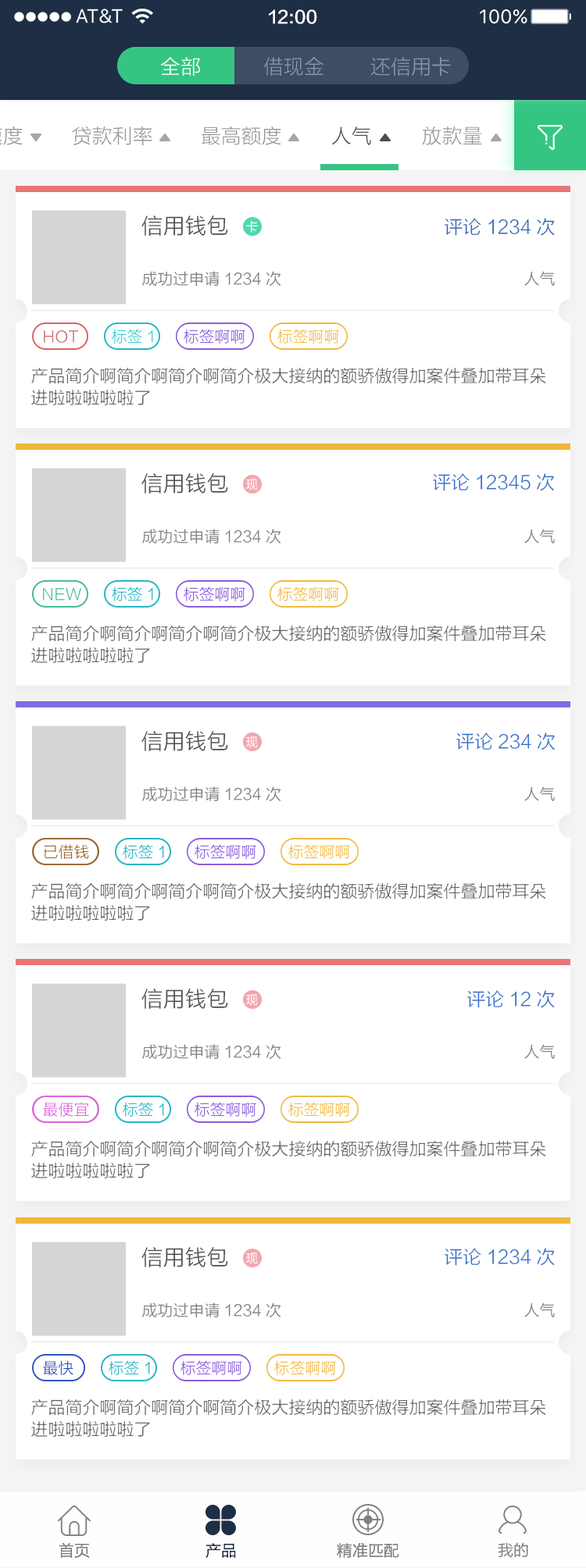
<style>
.page{position:relative;width:586px;height:1568px;background:#ffffff}
.page>*{position:absolute;margin:0}
.t1{font:17.2px "FZLTZHK--GBK1-0";color:#ffffff}
.t2{font:20.3px "FZLTXHK";color:#ffffff}
.t3{font:20.3px "FZLTXHK";color:#8895a8}
.t4{font:20.3px "FZLTXHK";color:#999999}
.t5{font:20.3px "FZLTXHK";color:#4d4d4d}
.t6{font:21.9px "FZLTXHK";color:#4d4d4d}
.t7{font:12.5px "FZLTXHK";color:#ffffff}
.t8{font:18.7px "FZLTXHK";color:#3167b5}
.t9{font:15.6px "FZLTXHK";color:#808080}
.t10{font:15.6px "FZLTXHK";color:#33cccc}
.t11{font:15.6px "FZLTXHK";color:#8857db}
.t12{font:15.6px "FZLTXHK";color:#f1b73c}
.t13{font:15.6px "FZLTXHK";color:#cc6666}
.t14{font:17.2px/21.9px "FZLTXHK";color:#666666}
.t15{font:18.7px "FZLTXHK";color:#3170cc}
.t16{font:15.6px "FZLTXHK";color:#45b991}
.t17{font:15.6px "FZLTXHK";color:#21b5c3}
.t18{font:15.6px "FZLTXHK";color:#996633}
.t19{font:15.6px "FZLTXHK";color:#db5edc}
.t20{font:15.6px "FZLTXHK";color:#294fbb}
.t21{font:15.6px "FZLTXHK";color:#1e2e45}
.t22{font:15.6px "FZLTHK--GBK1-0";color:#808080}
</style>
<div class="page">
<p class="t1" style="left:269px;top:9px;width:48px;height:15px">12:00</p>
<p class="t2" style="left:161px;top:57px;width:39px;height:19px">全部</p>
<p class="t3" style="left:263px;top:57px;width:60px;height:19px">借现金</p>
<p class="t3" style="left:371px;top:57px;width:80px;height:19px">还信用卡</p>
<p class="t4" style="left:72px;top:126px;width:80px;height:20px">贷款利率</p>
<p class="t4" style="left:201px;top:126px;width:80px;height:19px">最高额度</p>
<p class="t4" style="left:422px;top:126px;width:60px;height:19px">放款量</p>
<p class="t5" style="left:332px;top:127px;width:39px;height:18px">人气</p>
<p class="t6" style="left:141px;top:216px;width:87px;height:20px">信用钱包</p>
<p class="t7" style="left:246px;top:220px;width:12px;height:13px">卡</p>
<p class="t8" style="left:444px;top:218px;width:110px;height:18px">评论1234次</p>
<p class="t9" style="left:142px;top:271px;width:139px;height:16px">成功过申请1234次</p>
<p class="t9" style="left:524px;top:271px;width:30px;height:15px">人气</p>
<p class="t10" style="left:112px;top:329px;width:41px;height:15px">标签1</p>
<p class="t11" style="left:184px;top:329px;width:61px;height:15px">标签啊啊</p>
<p class="t12" style="left:277px;top:329px;width:62px;height:15px">标签啊啊</p>
<p class="t13" style="left:44px;top:330px;width:35px;height:13px">HOT</p>
<p class="t14" style="left:31px;top:367px;width:515px;height:38px">产品简介啊简介啊简介啊简介极大接纳的额骄傲得加案件叠加带耳朵<br>进啦啦啦啦啦了</p>
<p class="t6" style="left:141px;top:473px;width:87px;height:21px">信用钱包</p>
<p class="t15" style="left:433px;top:473px;width:121px;height:18px">评论12345次</p>
<p class="t7" style="left:246px;top:479px;width:12px;height:11px">现</p>
<p class="t9" style="left:142px;top:529px;width:139px;height:15px">成功过申请1234次</p>
<p class="t9" style="left:524px;top:529px;width:30px;height:14px">人气</p>
<p class="t16" style="left:43px;top:588px;width:38px;height:12px">NEW</p>
<p class="t17" style="left:112px;top:586px;width:41px;height:15px">标签1</p>
<p class="t11" style="left:184px;top:586px;width:61px;height:15px">标签啊啊</p>
<p class="t12" style="left:277px;top:586px;width:62px;height:15px">标签啊啊</p>
<p class="t14" style="left:31px;top:625px;width:515px;height:38px">产品简介啊简介啊简介啊简介极大接纳的额骄傲得加案件叠加带耳朵<br>进啦啦啦啦啦了</p>
<p class="t6" style="left:141px;top:731px;width:87px;height:20px">信用钱包</p>
<p class="t7" style="left:246px;top:736px;width:12px;height:12px">现</p>
<p class="t15" style="left:456px;top:732px;width:98px;height:18px">评论234次</p>
<p class="t9" style="left:142px;top:786px;width:139px;height:16px">成功过申请1234次</p>
<p class="t9" style="left:524px;top:786px;width:30px;height:15px">人气</p>
<p class="t18" style="left:44px;top:844px;width:45px;height:15px">已借钱</p>
<p class="t17" style="left:123px;top:844px;width:41px;height:15px">标签1</p>
<p class="t11" style="left:194px;top:844px;width:62px;height:15px">标签啊啊</p>
<p class="t12" style="left:288px;top:844px;width:62px;height:15px">标签啊啊</p>
<p class="t14" style="left:31px;top:882px;width:515px;height:39px">产品简介啊简介啊简介啊简介极大接纳的额骄傲得加案件叠加带耳朵<br>进啦啦啦啦啦了</p>
<p class="t6" style="left:141px;top:989px;width:87px;height:20px">信用钱包</p>
<p class="t7" style="left:246px;top:994px;width:12px;height:12px">现</p>
<p class="t15" style="left:467px;top:990px;width:87px;height:18px">评论12次</p>
<p class="t9" style="left:142px;top:1044px;width:139px;height:16px">成功过申请1234次</p>
<p class="t9" style="left:524px;top:1044px;width:30px;height:15px">人气</p>
<p class="t19" style="left:43px;top:1102px;width:46px;height:15px">最便宜</p>
<p class="t17" style="left:123px;top:1102px;width:41px;height:15px">标签1</p>
<p class="t11" style="left:194px;top:1102px;width:62px;height:15px">标签啊啊</p>
<p class="t12" style="left:288px;top:1102px;width:62px;height:15px">标签啊啊</p>
<p class="t14" style="left:31px;top:1140px;width:515px;height:38px">产品简介啊简介啊简介啊简介极大接纳的额骄傲得加案件叠加带耳朵<br>进啦啦啦啦啦了</p>
<p class="t6" style="left:141px;top:1247px;width:87px;height:20px">信用钱包</p>
<p class="t7" style="left:246px;top:1253px;width:12px;height:11px">现</p>
<p class="t15" style="left:444px;top:1248px;width:110px;height:18px">评论1234次</p>
<p class="t9" style="left:142px;top:1303px;width:139px;height:15px">成功过申请1234次</p>
<p class="t9" style="left:524px;top:1303px;width:30px;height:14px">人气</p>
<p class="t20" style="left:43px;top:1360px;width:30px;height:15px">最快</p>
<p class="t17" style="left:109px;top:1360px;width:41px;height:15px">标签1</p>
<p class="t11" style="left:180px;top:1360px;width:62px;height:15px">标签啊啊</p>
<p class="t12" style="left:274px;top:1360px;width:62px;height:15px">标签啊啊</p>
<p class="t14" style="left:31px;top:1399px;width:515px;height:38px">产品简介啊简介啊简介啊简介极大接纳的额骄傲得加案件叠加带耳朵<br>进啦啦啦啦啦了</p>
<p class="t9" style="left:59px;top:1542px;width:31px;height:16px">首页</p>
<p class="t21" style="left:205px;top:1543px;width:31px;height:15px">产品</p>
<p class="t9" style="left:337px;top:1543px;width:62px;height:15px">精准匹配</p>
<p class="t22" style="left:497px;top:1542px;width:31px;height:16px">我的</p>
</div>
